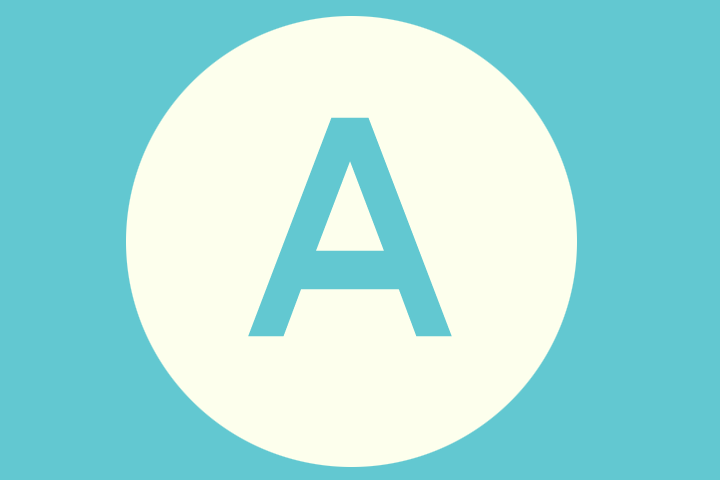
<style>
.page{position:relative;width:720px;height:480px;background:#62c8d1}
.page>*{position:absolute;margin:0}
.t1{font:292.2px "BlairMdITCTTMedium";letter-spacing:0.05em;color:#62c8d1;font-weight:bold;scale:0.72 1}
</style>
<div class="page">
<p class="t1" style="left:248px;top:117px;width:204px;height:220px">A</p>
</div>
